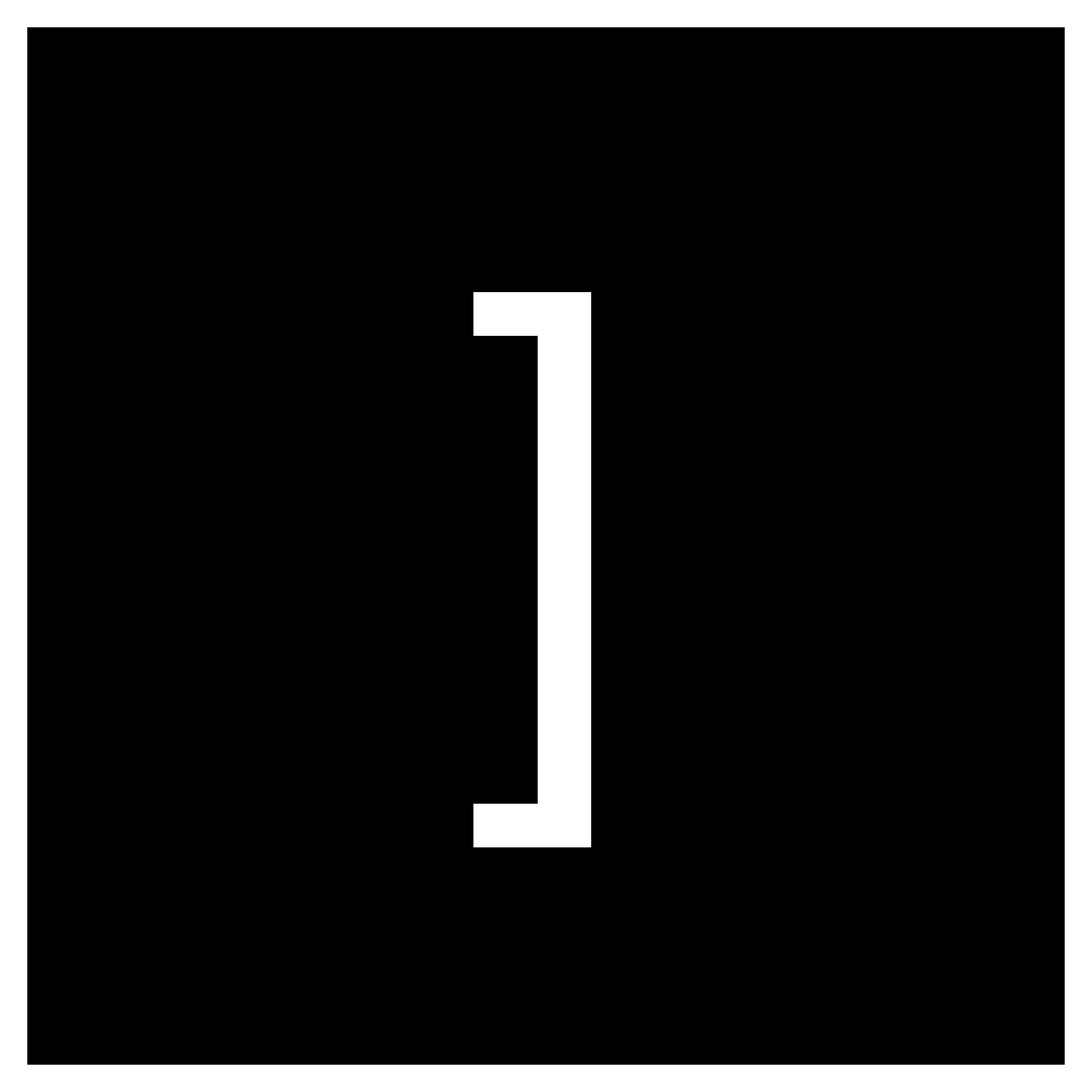
<style>
.page{position:relative;width:1092px;height:1092px;background:#000000}
.page>*{position:absolute;margin:0}
.t1{font:606.7px "ArialMT";color:#ffffff}
</style>
<div class="page">
<p class="t1" style="left:473px;top:292px;width:118px;height:555px">]</p>
</div>
